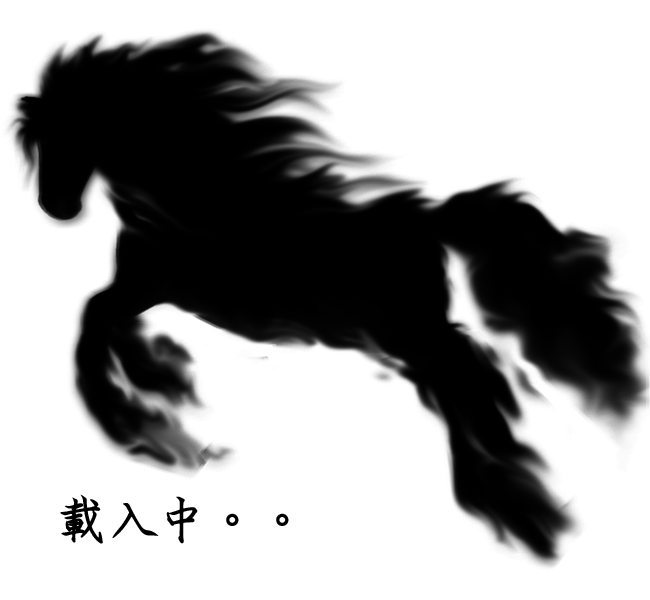
<style>
.page{position:relative;width:650px;height:600px;background:#ffffff}
.page>*{position:absolute;margin:0}
.t1{font:50px "HanWangWCL07";color:#000000}
</style>
<div class="page">
<p class="t1" style="left:60px;top:494px;width:179px;height:50px">載入中。</p>
<p class="t1" style="left:60px;top:494px;width:229px;height:50px">載入中。。</p>
<p class="t1" style="left:60px;top:494px;width:279px;height:50px">載入中。。。</p>
</div>
